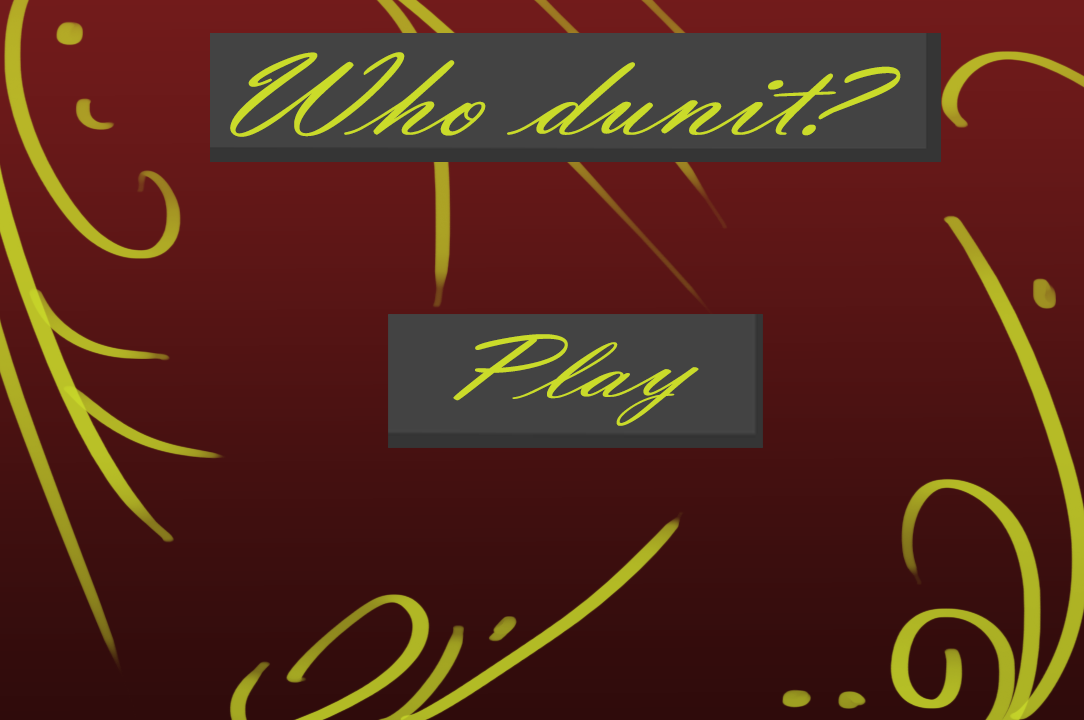
<style>
.page{position:relative;width:1084px;height:720px}
.page>*{position:absolute;margin:0}
.t1{font:122.6px "VladimirScript";color:#cadb2a;scale:1.31 1}
.t2{font:93.6px "VladimirScript";color:#cadb2a;scale:1.6 1}
</style>
<div class="page">
<p class="t1" style="left:230px;top:52px;width:671px;height:85px">Who dunit?</p>
<p class="t2" style="left:453px;top:334px;width:246px;height:92px;rotate:-1deg">Play</p>
</div>
